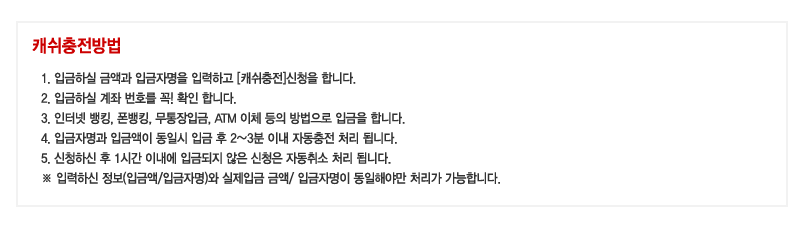
<style>
.page{position:relative;width:795px;height:228px;background:#ffffff}
.page>*{position:absolute;margin:0}
.t1{font:18px "YDIYGO340";color:#cc0000;scale:0.9 1}
.t2{font:13px/20px "YDIYGO330";letter-spacing:-0.025em;color:#333333;scale:0.9 1}
</style>
<div class="page">
<p class="t1" style="left:32px;top:37px;width:88px;height:17px">캐쉬충전방법</p>
<p class="t2" style="left:41px;top:71px;width:459px;height:114px">1. 입금하실 금액과 입금자명을 입력하고 [캐쉬충전]신청을 합니다.<br>2. 입금하실 계좌 번호를 꼭! 확인 합니다.<br>3. 인터넷 뱅킹, 폰뱅킹, 무통장입금, ATM 이체 등의 방법으로 입금을 합니다.<br>4. 입금자명과 입금액이 동일시 입금 후 2~3분 이내 자동충전 처리 됩니다.<br>5. 신청하신 후 1시간 이내에 입금되지 않은 신청은 자동취소 처리 됩니다.<br>※ 입력하신 정보(입금액/입금자명)와 실제입금 금액/ 입금자명이 동일해야만 처리가 가능합니다.</p>
</div>
